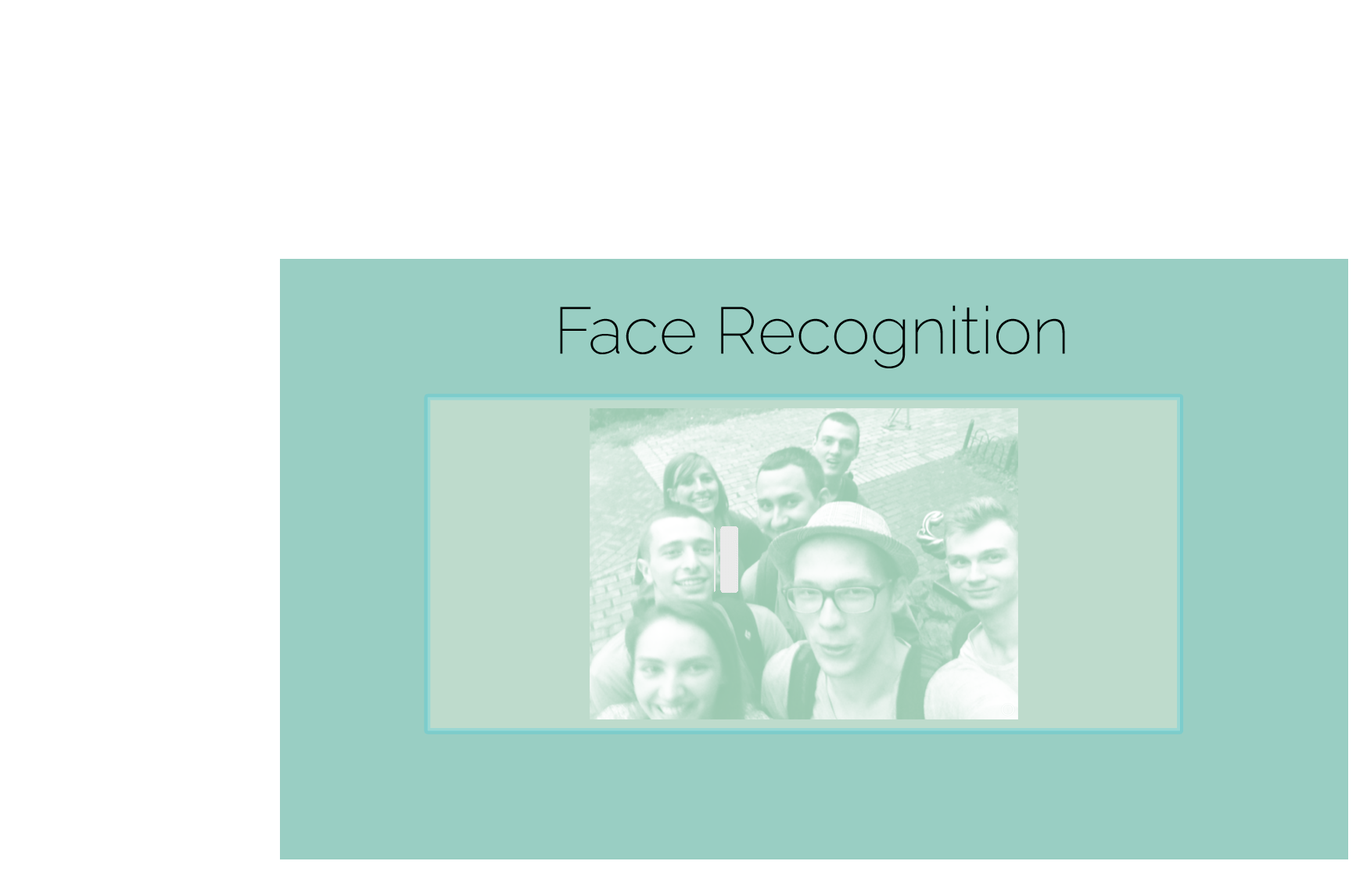
<style>
.page{position:relative;width:1356px;height:879px;background:#ffffff}
.page>*{position:absolute;margin:0}
.t1{font:65.9px "Raleway-ExtraLight";color:#000000}
</style>
<div class="page">
<p class="t1" style="left:560px;top:305px;width:505px;height:63px">Face Recognition</p>
</div>
